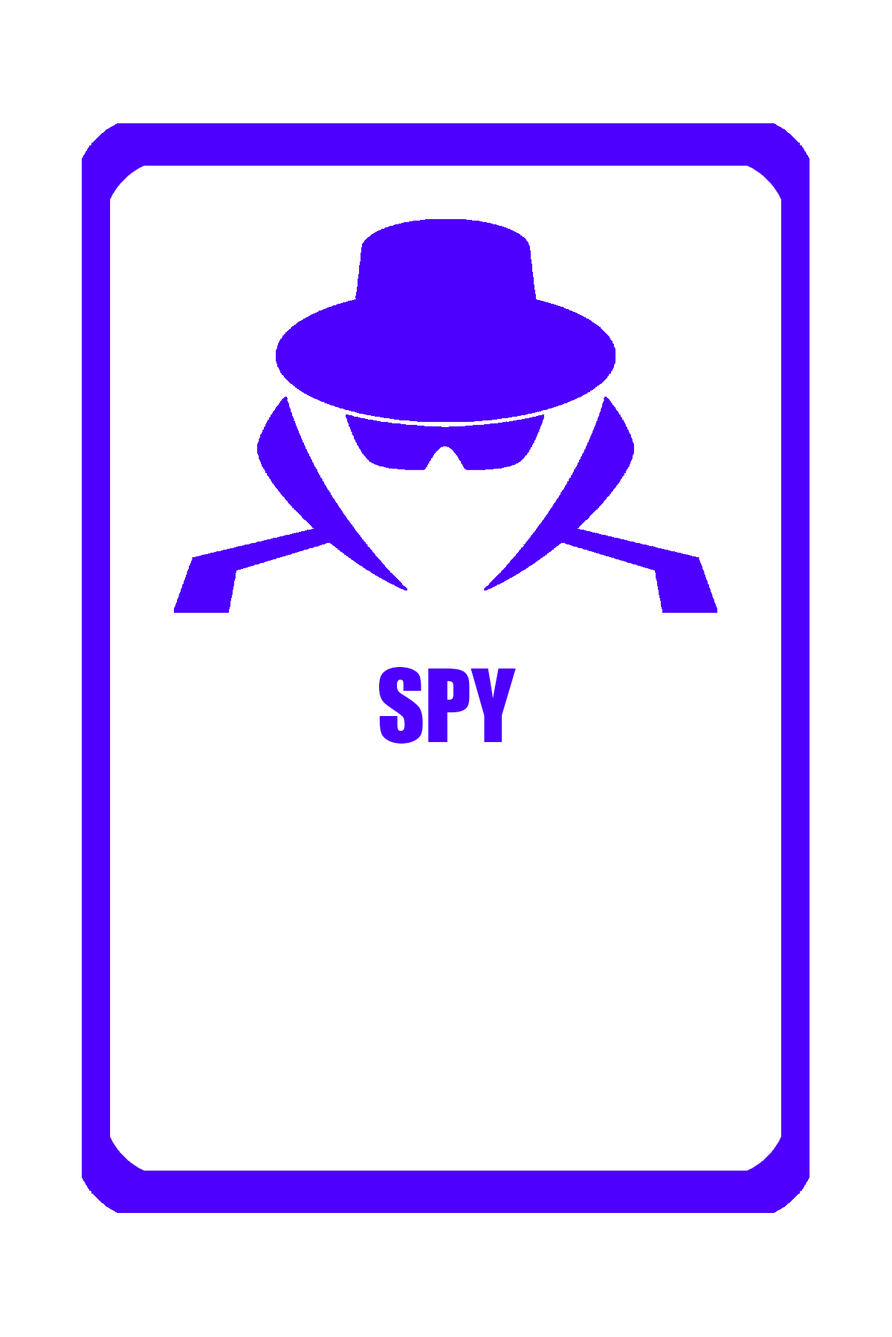
<style>
.page{position:relative;width:892px;height:1337px;background:#ffffff}
.page>*{position:absolute;margin:0}
.t1{font:92.9px "Impact";color:#4e00ff}
</style>
<div class="page">
<p class="t1" style="left:378px;top:667px;width:138px;height:77px">SPY</p>
</div>
